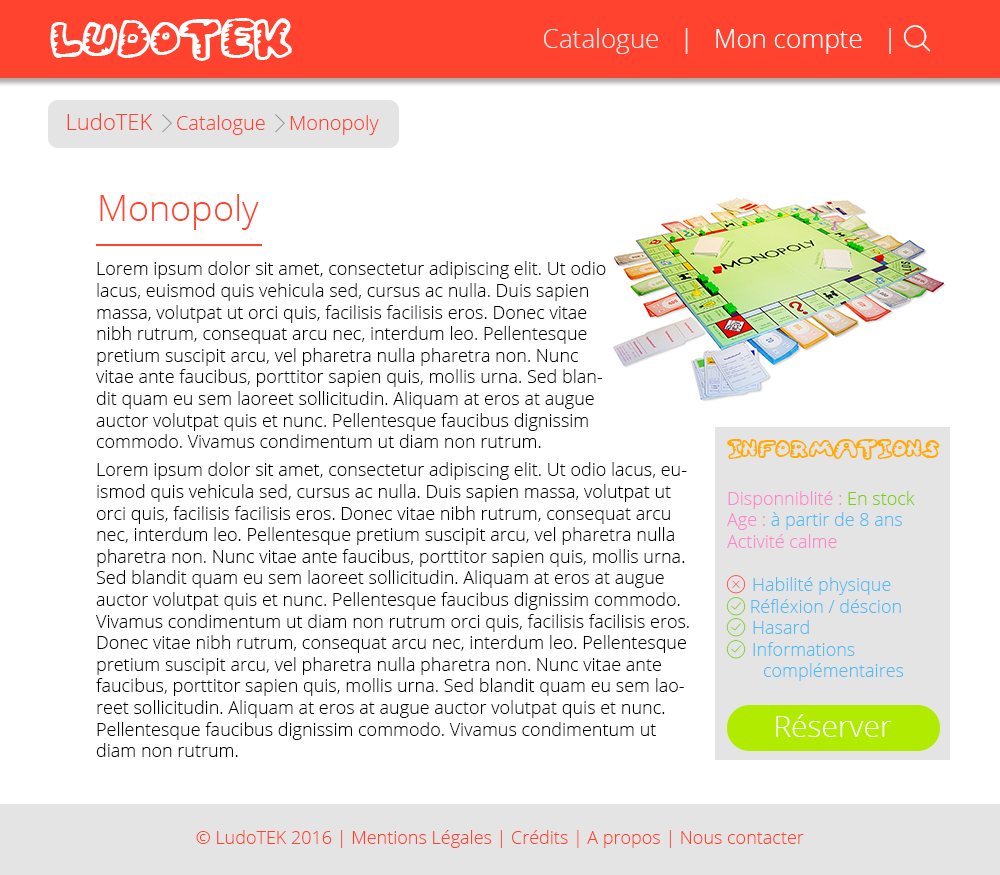
<style>
.page{position:relative;width:1000px;height:875px;background:#ffffff}
.page>*{position:absolute;margin:0}
.t1{font:60px "Gwibble";color:#ffffff}
.t2{font:36px "OpenSans-Light";color:#ff432e}
.t3{font:18px "OpenSans-Light";color:#000000}
.t4{font:30px "OpenSans-Light";color:#ffffff}
.t5{font:18px "OpenSans-Light";color:#ff432e}
</style>
<div class="page">
<p class="t1" style="left:50px;top:18px;width:242px;height:43px">LudoTEK</p>
<p class="t2" style="left:100px;top:194px;width:159px;height:36px">Monopoly</p>
<p class="t3" style="left:96px;top:261px;width:510px;height:187px">Lorem ipsum dolor sit amet, consectetur adipiscing elit. Ut odio lacus, euismod quis vehicula sed, cursus ac nulla. Duis sapien massa, volutpat ut orci quis, facilisis facilisis eros. Donec vitae nibh rutrum, consequat arcu nec, interdum leo. Pellentesque pretium suscipit arcu, vel pharetra nulla pharetra non. Nunc vitae ante faucibus, porttitor sapien quis, mollis urna. Sed blandit quam eu sem laoreet sollicitudin. Aliquam at eros at augue auctor volutpat quis et nunc. Pellentesque faucibus dignissim commodo. Vivamus condimentum ut diam non rutrum.</p>
<p class="t3" style="left:96px;top:462px;width:593px;height:295px">Lorem ipsum dolor sit amet, consectetur adipiscing elit. Ut odio lacus, euismod quis vehicula sed, cursus ac nulla. Duis sapien massa, volutpat ut orci quis, facilisis facilisis eros. Donec vitae nibh rutrum, consequat arcu nec, interdum leo. Pellentesque pretium suscipit arcu, vel pharetra nulla pharetra non. Nunc vitae ante faucibus, porttitor sapien quis, mollis urna. Sed blandit quam eu sem laoreet sollicitudin. Aliquam at eros at augue auctor volutpat quis et nunc. Pellentesque faucibus dignissim commodo. Vivamus condimentum ut diam non rutrum orci quis, facilisis facilisis eros. Donec vitae nibh rutrum, consequat arcu nec, interdum leo. Pellentesque pretium suscipit arcu, vel pharetra nulla pharetra non. Nunc vitae ante faucibus, porttitor sapien quis, mollis urna. Sed blandit quam eu sem laoreet sollicitudin. Aliquam at eros at augue auctor volutpat quis et nunc. Pellentesque faucibus dignissim commodo. Vivamus condimentum ut diam non rutrum.</p>
<p class="t4" style="left:776px;top:714px;width:116px;height:23px">Réserver</p>
<p class="t5" style="left:196px;top:830px;width:608px;height:18px">© LudoTEK 2016 | Mentions Légales | Crédits | A propos | Nous contacter</p>
</div>
